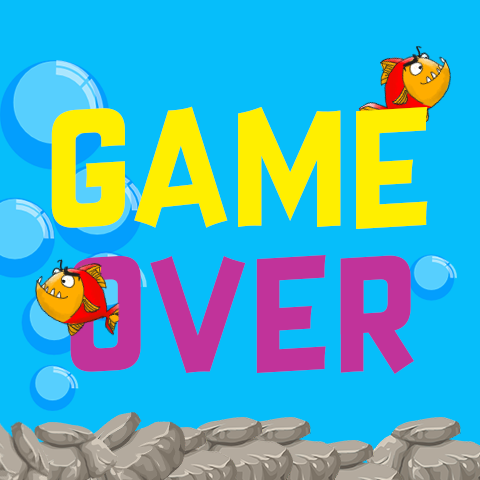
<style>
.page{position:relative;width:480px;height:480px;background:#06befa}
.page>*{position:absolute;margin:0}
.t1{font:161.3px "CrazySixties";color:#ffef00}
.t2{font:156.3px "CrazySixties";color:#c1339a}
</style>
<div class="page">
<p class="t1" style="left:51px;top:106px;width:377px;height:123px">GAME</p>
<p class="t2" style="left:70px;top:255px;width:344px;height:119px">OVER</p>
</div>
